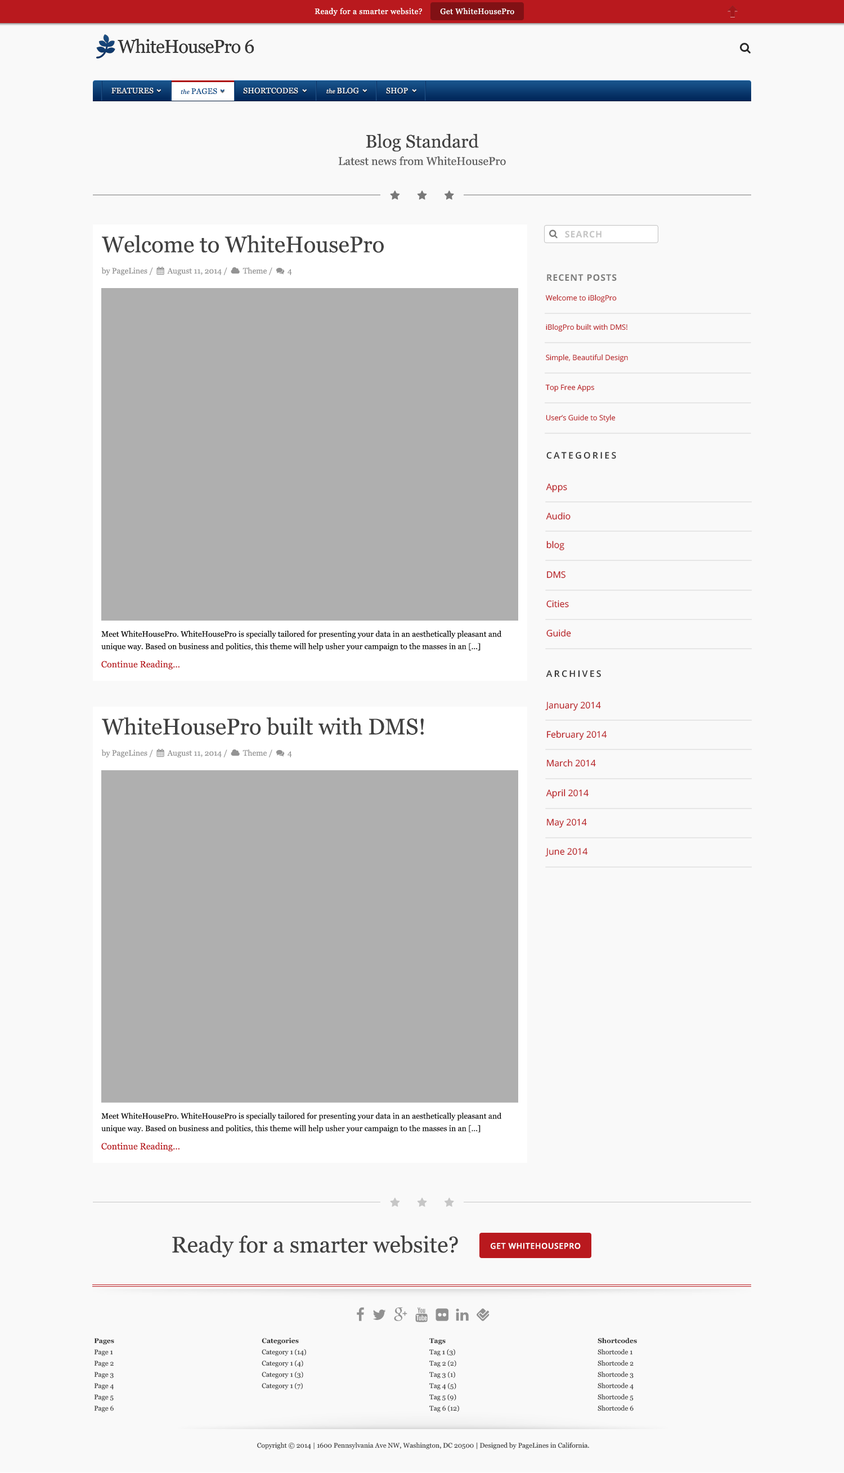
<style>
.page{position:relative;width:844px;height:1473px;background:#f9f9f9}
.page>*{position:absolute;margin:0}
.t1{font:7.9px "Georgia";letter-spacing:0.033em;color:#ffffff}
.t2{font:7.9px "Georgia";letter-spacing:0.02em;color:#ededed;text-transform:uppercase}
.t3{font:6.2px "Georgia-Italic";letter-spacing:0.02em;color:#ededed}
.t4{font:7.9px "Georgia";letter-spacing:0.02em;color:#0f4f89;text-transform:uppercase}
.t5{font:6.2px "Georgia-Italic";letter-spacing:0.02em;color:#0f4f89}
.t6{font:18px "Georgia";color:#414141}
.t7{font:11.3px "Georgia";color:#5a5a5a}
.t8{font:9px "OpenSans-Bold";letter-spacing:0.06em;color:#c4c4c4;text-transform:uppercase}
.t9{font:22.5px "Georgia";color:#414141}
.t10{font:9px "OpenSans-Bold";letter-spacing:0.06em;color:#7c7c7b;text-transform:uppercase}
.t11{font:7.3px "OpenSans";color:#b9191e}
.t12{font:9px "OpenSans-Semibold";letter-spacing:0.2em;color:#333333;text-transform:uppercase}
.t13{font:9px "OpenSans";color:#b9191e}
.t14{font:7.9px/12.4px "Georgia";color:#000000}
.t15{font:9px "Georgia";color:#b9191e}
.t16{font:7.9px "OpenSans-Semibold";letter-spacing:0.05em;color:#ffffff;text-transform:uppercase}
.t17{font:6.7px/11.2px "Georgia";color:#333333}
.t18{font:6.7px/11.2px "Georgia-Bold";color:#333333}
.t19{font:6.7px "Georgia";color:#333333}
</style>
<div class="page">
<p class="t1" style="left:314px;top:8px;width:108px;height:8px">Ready for a smarter website?</p>
<p class="t1" style="left:440px;top:8px;width:74px;height:7px">Get WhiteHousePro</p>
<p class="t2" style="left:111px;top:87px;width:297px;height:7px">Features     <span class="t3">the </span>PAGES      Shortcodes       <span class="t3">the </span>Blog        Shop</p>
<p class="t4" style="left:181px;top:88px;width:36px;height:7px"><span class="t5">the </span>PAGES</p>
<p class="t6" style="left:366px;top:134px;width:113px;height:18px">Blog Standard</p>
<p class="t7" style="left:338px;top:156px;width:168px;height:9px">Latest news from WhiteHousePro</p>
<p class="t8" style="left:565px;top:231px;width:36px;height:7px">Search</p>
<p class="t9" style="left:102px;top:235px;width:282px;height:18px">Welcome to WhiteHousePro</p>
<p class="t10" style="left:547px;top:274px;width:70px;height:7px">Recent Posts</p>
<p class="t11" style="left:545px;top:294px;width:72px;height:9px">Welcome to iBlogPro</p>
<p class="t11" style="left:546px;top:323px;width:81px;height:9px">iBlogPro built with DMS!</p>
<p class="t11" style="left:546px;top:354px;width:82px;height:8px">Simple, Beautiful Design</p>
<p class="t11" style="left:545px;top:384px;width:49px;height:8px">Top Free Apps</p>
<p class="t11" style="left:546px;top:414px;width:69px;height:8px">User’s Guide to Style</p>
<p class="t12" style="left:546px;top:452px;width:70px;height:7px">Categories</p>
<p class="t13" style="left:546px;top:483px;width:21px;height:9px">Apps</p>
<p class="t13" style="left:546px;top:512px;width:24px;height:8px">Audio</p>
<p class="t13" style="left:546px;top:541px;width:18px;height:9px">blog</p>
<p class="t13" style="left:547px;top:571px;width:18px;height:7px">DMS</p>
<p class="t13" style="left:546px;top:600px;width:23px;height:8px">Cities</p>
<p class="t13" style="left:546px;top:629px;width:25px;height:8px">Guide</p>
<p class="t14" style="left:101px;top:631px;width:401px;height:20px">Meet WhiteHousePro. WhiteHousePro is specially tailored for presenting your data in an aesthetically pleasant and unique way. Based on business and politics, this theme will help usher your campaign to the masses in an [...]</p>
<p class="t15" style="left:101px;top:660px;width:78px;height:9px">Continue Reading...</p>
<p class="t12" style="left:546px;top:670px;width:55px;height:7px">Archives</p>
<p class="t13" style="left:545px;top:702px;width:56px;height:9px">January 2014</p>
<p class="t9" style="left:102px;top:717px;width:322px;height:18px">WhiteHousePro built with DMS!</p>
<p class="t13" style="left:547px;top:730px;width:60px;height:10px">February 2014</p>
<p class="t13" style="left:547px;top:759px;width:49px;height:8px">March 2014</p>
<p class="t13" style="left:546px;top:789px;width:42px;height:9px">April 2014</p>
<p class="t13" style="left:547px;top:819px;width:40px;height:9px">May 2014</p>
<p class="t13" style="left:545px;top:848px;width:43px;height:9px">June 2014</p>
<p class="t14" style="left:101px;top:1112px;width:401px;height:21px">Meet WhiteHousePro. WhiteHousePro is specially tailored for presenting your data in an aesthetically pleasant and unique way. Based on business and politics, this theme will help usher your campaign to the masses in an [...]</p>
<p class="t15" style="left:101px;top:1142px;width:78px;height:10px">Continue Reading...</p>
<p class="t9" style="left:172px;top:1235px;width:286px;height:22px">Ready for a smarter website?</p>
<p class="t16" style="left:491px;top:1243px;width:90px;height:6px">Get WhiteHousePro</p>
<p class="t17" style="left:94px;top:1338px;width:20px;height:74px"><span class="t18">Pages<br></span>Page 1<br>Page 2<br>Page 3<br>Page 4<br>Page 5<br>Page 6</p>
<p class="t17" style="left:262px;top:1337px;width:44px;height:53px"><span class="t18">Categories<br></span>Category 1 (14)<br>Category 1 (4)<br>Category 1 (3)<br>Category 1 (7)</p>
<p class="t17" style="left:429px;top:1338px;width:30px;height:74px"><span class="t18">Tags<br></span>Tag 1 (3)<br>Tag 2 (2)<br>Tag 3 (1)<br>Tag 4 (5)<br>Tag 5 (9)<br>Tag 6 (12)</p>
<p class="t17" style="left:597px;top:1337px;width:40px;height:74px"><span class="t18">Shortcodes<br></span>Shortcode 1<br>Shortcode 2<br>Shortcode 3<br>Shortcode 4<br>Shortcode 5<br>Shortcode 6</p>
<p class="t19" style="left:257px;top:1442px;width:332px;height:7px">Copyright © 2014 | 1600 Pennsylvania Ave NW, Washington, DC 20500 | Designed by PageLines in California.</p>
</div>
